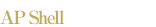
<style>
.page{position:relative;width:156px;height:27px;background:#ffffff}
.page>*{position:absolute;margin:0}
.t1{font:18px "RyuminPro-ExBold";letter-spacing:-0.08em;color:#c4a956}
</style>
<div class="page">
<p class="t1" style="left:0px;top:10px;width:64px;height:15px">AP Shell</p>
</div>
